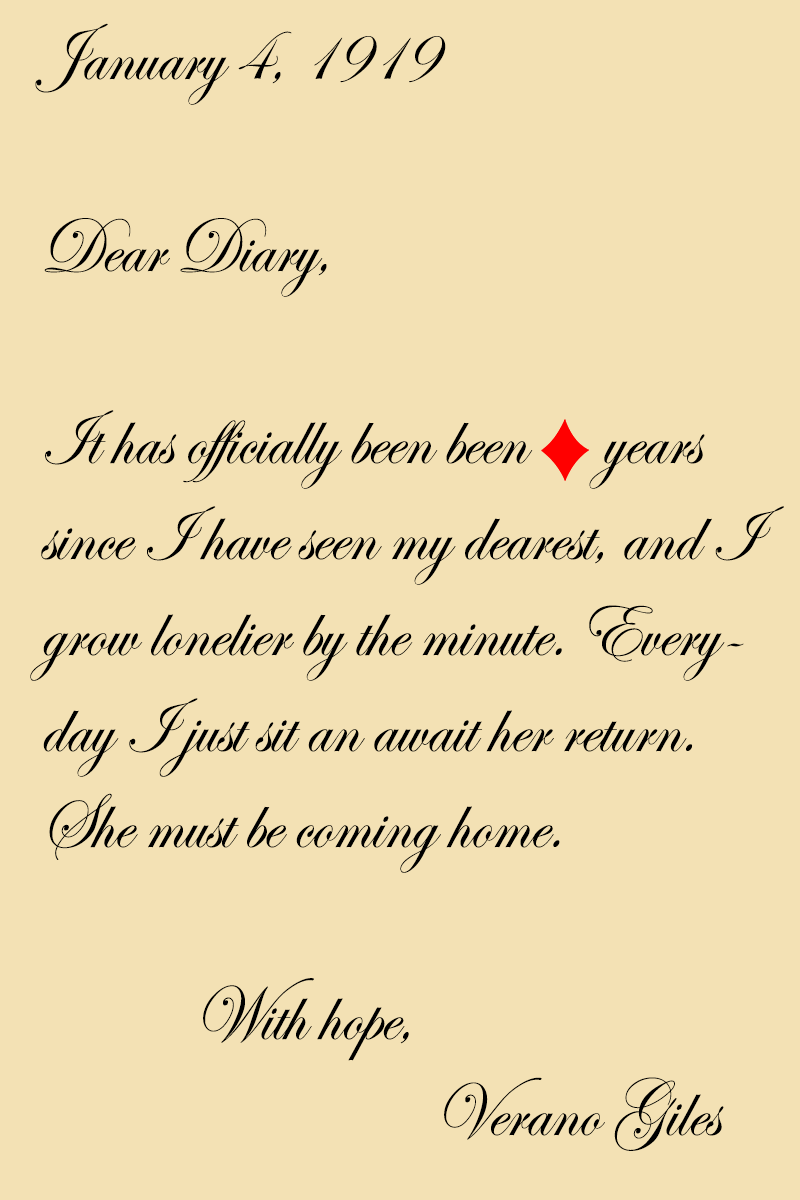
<style>
.page{position:relative;width:800px;height:1200px;background:#f3e1b4}
.page>*{position:absolute;margin:0}
.t1{font:80px "EdwardianScriptITC";color:#000000;scale:0.9 1}
</style>
<div class="page">
<p class="t1" style="left:30px;top:23px;width:754px;height:1128px">January 4, 1919<br><br>Dear Diary,<br><br>It has officially been been      years since I have seen my dearest, and I grow lonelier by the minute. Everyday I just sit an await her return. She must be coming home.<br>          <br>            With hope,<br>                               Verano Giles</p>
</div>
